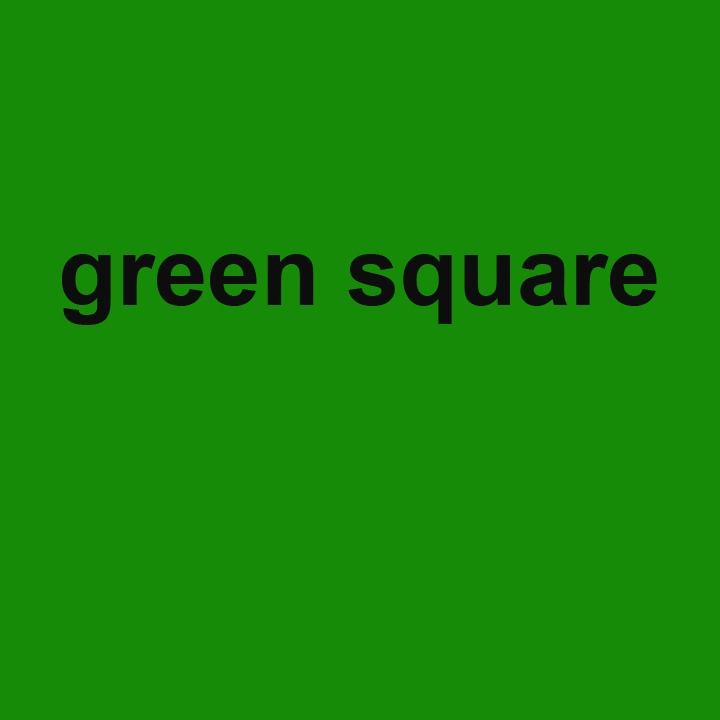
<style>
.page{position:relative;width:720px;height:720px;background:#168b07}
.page>*{position:absolute;margin:0}
.t1{font:96px "Arial-BoldMT";color:#0c0d0c}
</style>
<div class="page">
<p class="t1" style="left:62px;top:254px;width:595px;height:71px">green square</p>
</div>
